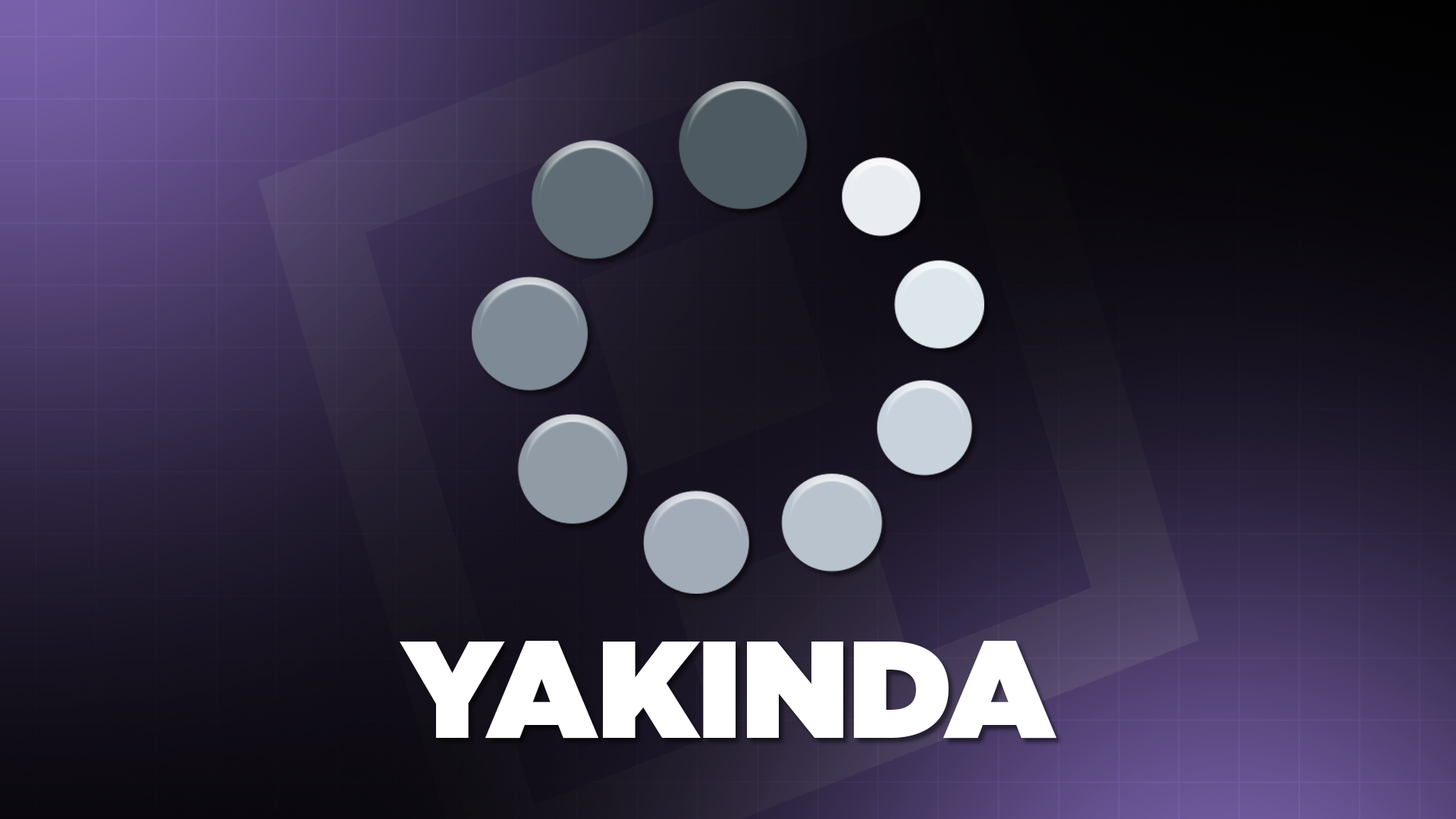
<style>
.page{position:relative;width:1456px;height:819px}
.page>*{position:absolute;margin:0}
.t1{font:137.6px "Gotham-Ultra";color:#ffffff;text-transform:uppercase}
</style>
<div class="page">
<p class="t1" style="left:400px;top:641px;width:656px;height:98px">YAKINDA</p>
</div>
